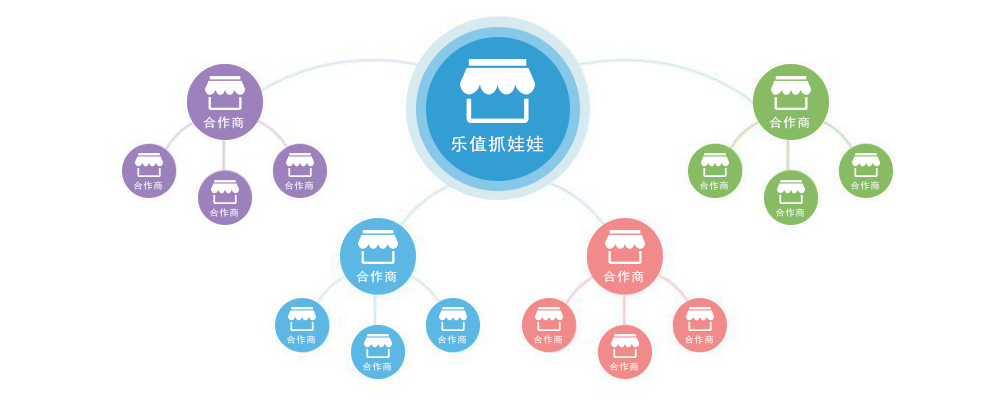
<style>
.page{position:relative;width:1000px;height:400px;background:#ffffff}
.page>*{position:absolute;margin:0}
.t1{font:12.8px "SimHei";letter-spacing:0.05em;color:#ffffff;scale:1.04 1}
.t2{font:17.7px "SimHei";letter-spacing:0.05em;color:#ffffff}
.t3{font:9.1px "SimHei";letter-spacing:0.05em;scale:1.04 1}
</style>
<div class="page">
<p class="t1" style="left:203px;top:116px;width:41px;height:13px">合作商</p>
<p class="t1" style="left:769px;top:116px;width:41px;height:13px">合作商</p>
<p class="t2" style="left:451px;top:135px;width:93px;height:17px">乐值抓娃娃</p>
<p class="t3" style="left:133px;top:181px;width:29px;height:9px">合作商</p>
<p class="t3" style="left:284px;top:181px;width:29px;height:9px">合作商</p>
<p class="t3" style="left:699px;top:181px;width:29px;height:9px">合作商</p>
<p class="t3" style="left:850px;top:181px;width:29px;height:9px">合作商</p>
<p class="t3" style="left:209px;top:208px;width:29px;height:9px">合作商</p>
<p class="t3" style="left:775px;top:208px;width:29px;height:9px">合作商</p>
<p class="t1" style="left:356px;top:270px;width:41px;height:13px">合作商</p>
<p class="t1" style="left:603px;top:270px;width:41px;height:13px">合作商</p>
<p class="t3" style="left:286px;top:335px;width:29px;height:9px">合作商</p>
<p class="t3" style="left:437px;top:335px;width:29px;height:9px">合作商</p>
<p class="t3" style="left:533px;top:335px;width:29px;height:9px">合作商</p>
<p class="t3" style="left:684px;top:335px;width:29px;height:9px">合作商</p>
<p class="t3" style="left:362px;top:362px;width:29px;height:9px">合作商</p>
<p class="t3" style="left:609px;top:362px;width:29px;height:9px">合作商</p>
</div>
